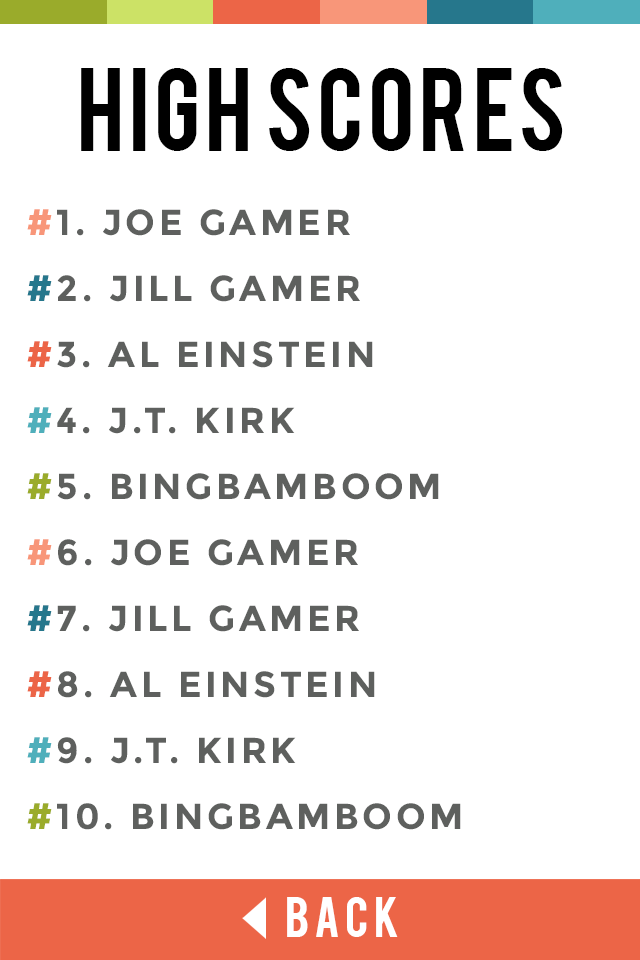
<style>
.page{position:relative;width:640px;height:960px;background:#ffffff}
.page>*{position:absolute;margin:0}
.t1{font:90.9px "Bebas";letter-spacing:0.025em;color:#000000}
.t2{font:36px/66px "Montserrat-Bold";letter-spacing:0.1em;color:#5e605e}
.t3{font:36px/66px "Montserrat-Bold";letter-spacing:0.1em;color:#f89679}
.t4{font:36px/66px "Montserrat-Bold";letter-spacing:0.1em;color:#26778c}
.t5{font:36px/66px "Montserrat-Bold";letter-spacing:0.1em;color:#ec6547}
.t6{font:36px/66px "Montserrat-Bold";letter-spacing:0.1em;color:#4fafbb}
.t7{font:36px/66px "Montserrat-Bold";letter-spacing:0.1em;color:#9aab2b}
.t8{font:45.3px "Bebas";letter-spacing:0.1em;color:#ffffff}
</style>
<div class="page">
<p class="t1" style="left:81px;top:68px;width:482px;height:83px">HIGH SCORES</p>
<p class="t2" style="left:27px;top:209px;width:434px;height:621px"><span class="t3">#</span>1. JOE GAMER<br><span class="t4">#</span>2. JILL GAMER<br><span class="t5">#</span>3. AL EINSTEIN<br><span class="t6">#</span>4. J.T. KIRK<br><span class="t7">#</span>5. BINGBAMBOOM<br><span class="t3">#</span>6. JOE GAMER<br><span class="t4">#</span>7. JILL GAMER<br><span class="t5">#</span>8. AL EINSTEIN<br><span class="t6">#</span>9. J.T. KIRK<br><span class="t7">#</span>10. BINGBAMBOOM</p>
<p class="t8" style="left:287px;top:897px;width:111px;height:40px">BACK</p>
</div>
